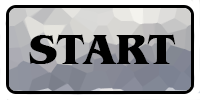
<style>
.page{position:relative;width:200px;height:100px}
.page>*{position:absolute;margin:0}
.t1{font:44.4px "AGBenguiatCyrBoldBold";color:#000000}
</style>
<div class="page">
<p class="t1" style="left:29px;top:34px;width:147px;height:30px">START</p>
</div>
